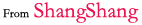
<style>
.page{position:relative;width:142px;height:25px;background:#ffffff}
.page>*{position:absolute;margin:0}
.t1{font:22px "STFangsong";color:#eb1451}
.t2{font:12px "STKaiti";color:#000000}
</style>
<div class="page">
<p class="t1" style="left:3px;top:2px;width:136px;height:21px"><span class="t2">From </span>ShangShang</p>
</div>
